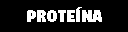
<style>
.page{position:relative;width:128px;height:32px;background:#000000}
.page>*{position:absolute;margin:0}
.t1{font:20px "Digitalt";color:#ffffff}
</style>
<div class="page">
<p class="t1" style="left:27px;top:7px;width:75px;height:15px">Proteína</p>
</div>
